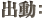
<style>
.page{position:relative;width:42px;height:19px;background:#ffffff}
.page>*{position:absolute;margin:0}
.t1{font:18px "RyuminPr6N-ExBold";color:#726a5f;font-weight:bold}
</style>
<div class="page">
<p class="t1" style="left:1px;top:0px;width:35px;height:18px">出動</p>
</div>
